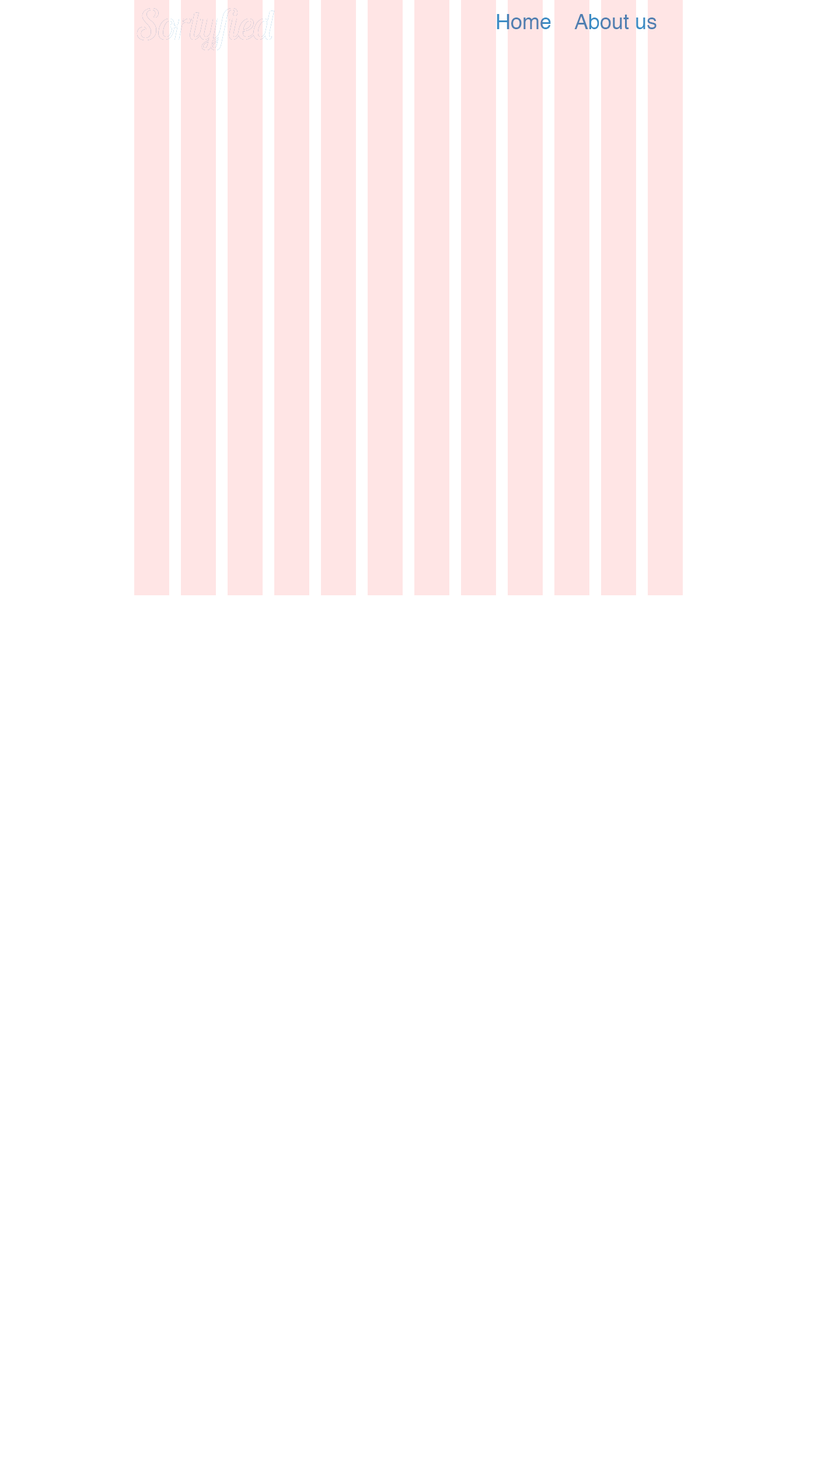
<style>
.page{position:relative;width:817px;height:1459px;background:#ffffff}
.page>*{position:absolute;margin:0}
.t1{font:21px "Helvetica";color:#3c8dc5}
</style>
<div class="page">
<p class="t1" style="left:497px;top:14px;width:54px;height:15px">Home</p>
<p class="t1" style="left:574px;top:14px;width:83px;height:15px">About us</p>
</div>
